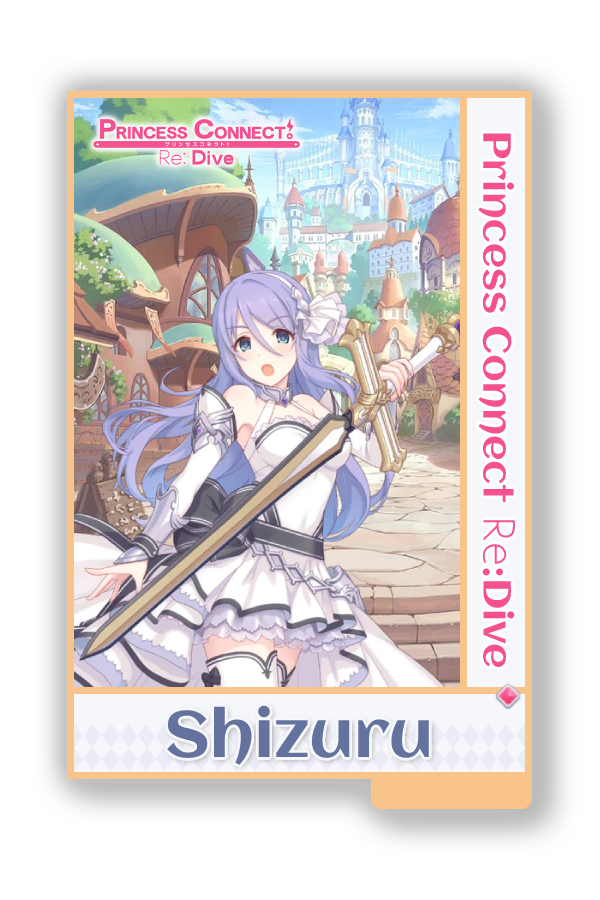
<style>
.page{position:relative;width:600px;height:900px;background:#ffffff}
.page>*{position:absolute;margin:0}
.t1{font:39px "Aclonica-Regular";color:#f55191}
.t2{font:39px "AaarghNormal";color:#f55191}
.t3{font:65px "Aclonica-Regular";color:#64739d}
</style>
<div class="page">
<p class="t1" style="left:478px;top:133px;width:38px;height:534px;rotate:90deg">Princess Connect <span class="t2">Re</span>:Dive</p>
<p class="t3" style="left:167px;top:705px;width:262px;height:60px">Shizuru</p>
</div>
